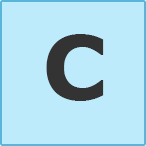
<style>
.page{position:relative;width:146px;height:146px;background:#beebfc}
.page>*{position:absolute;margin:0}
.t1{font:90px "Verdana-Bold";color:#333333}
</style>
<div class="page">
<p class="t1" style="left:46px;top:34px;width:58px;height:67px">C</p>
</div>
